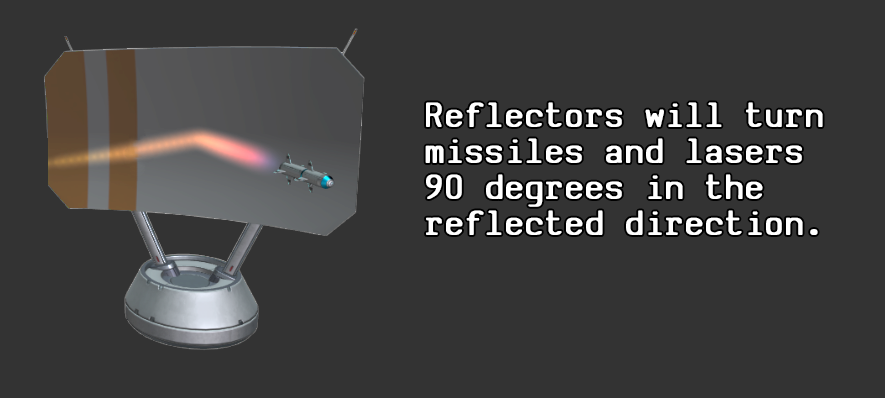
<style>
.page{position:relative;width:885px;height:398px;background:#333333}
.page>*{position:absolute;margin:0}
.t1{font:37.8px/36px "SVBasicManual-Bold";letter-spacing:0.05em;color:#ffffff;scale:0.95 1}
</style>
<div class="page">
<p class="t1" style="left:425px;top:102px;width:398px;height:133px">Reflectors will turn<br>missiles and lasers<br>90 degrees in the<br>reflected direction.</p>
</div>
